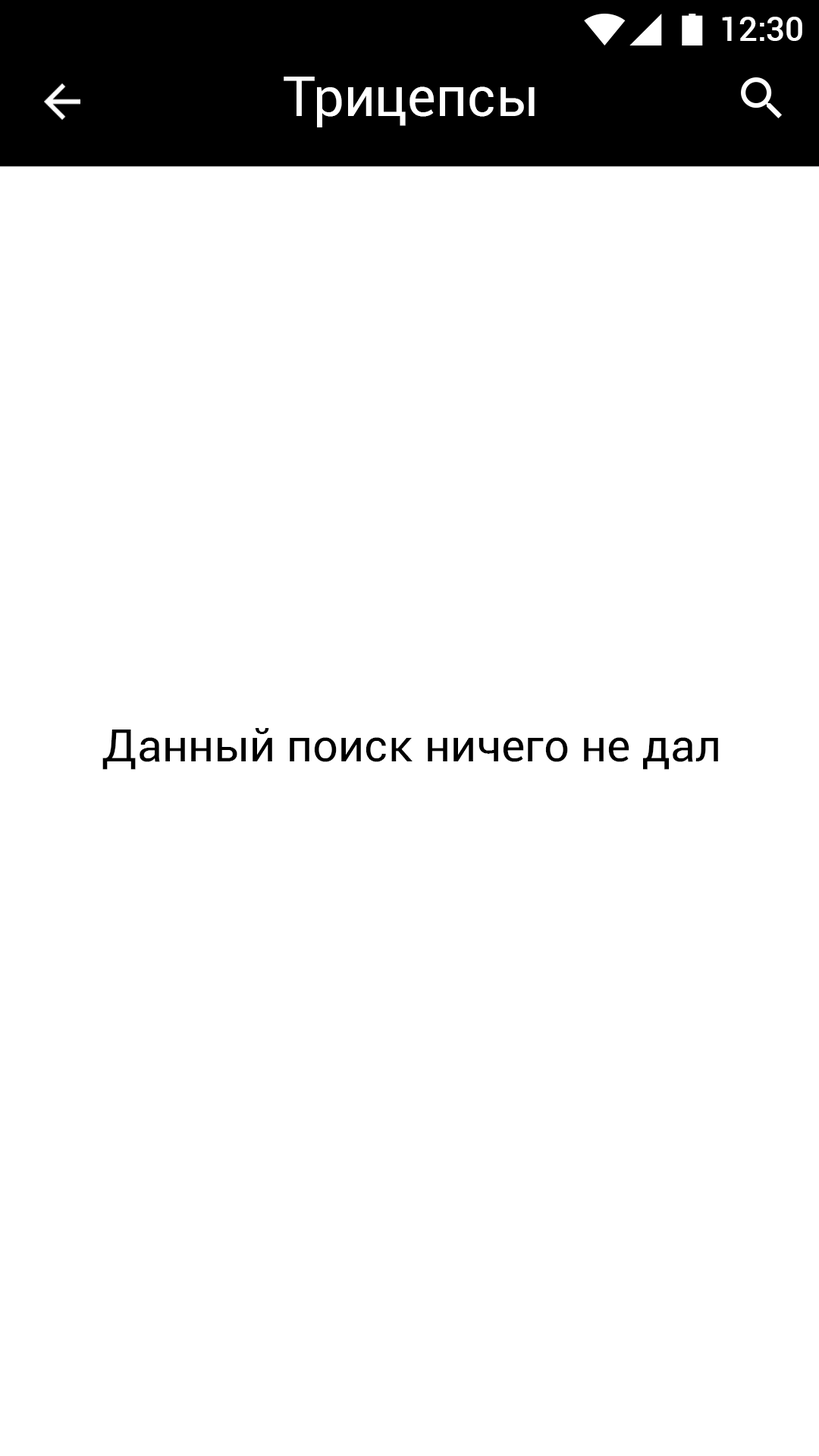
<style>
.page{position:relative;width:819px;height:1456px;background:#ffffff}
.page>*{position:absolute;margin:0}
.t1{font:33.4px "Roboto-Medium";color:#ffffff}
.t2{font:54.6px "Roboto-Regular";color:#ffffff}
.t3{font:45.5px "Roboto-Regular";color:#000000}
</style>
<div class="page">
<p class="t1" style="left:722px;top:17px;width:80px;height:24px">12:30</p>
<p class="t2" style="left:284px;top:77px;width:251px;height:50px">Трицепсы</p>
<p class="t3" style="left:102px;top:728px;width:616px;height:42px">Данный поиск ничего не дал</p>
</div>
